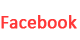
<style>
.page{position:relative;width:80px;height:40px;background:#ffffff}
.page>*{position:absolute;margin:0}
.t1{font:18.7px "Calibri";color:#ff3737;font-weight:bold}
</style>
<div class="page">
<p class="t1" style="left:1px;top:15px;width:76px;height:14px">Facebook</p>
</div>
